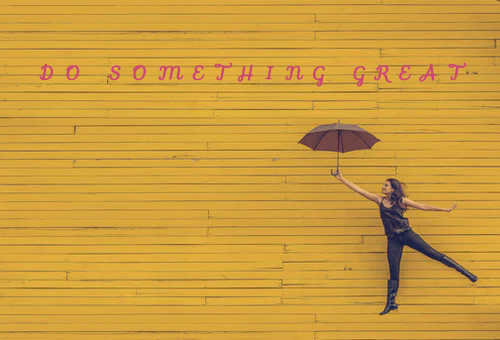
<style>
.page{position:relative;width:500px;height:340px}
.page>*{position:absolute;margin:0}
.t1{font:18px "Sofia-Regular";letter-spacing:0.62em;color:#cc4770;text-transform:uppercase;font-weight:bold;font-style:italic}
</style>
<div class="page">
<p class="t1" style="left:39px;top:62px;width:428px;height:25px">DO SOMETHING GREAT</p>
</div>
